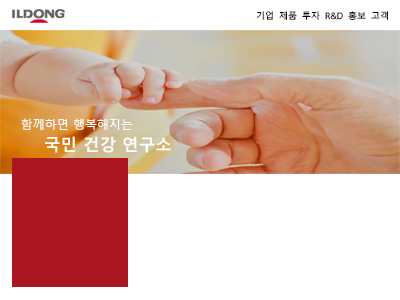
<style>
.page{position:relative;width:400px;height:300px;background:#ffffff}
.page>*{position:absolute;margin:0}
.t1{font:8.8px "MalgunGothic-Semilight";color:#050000}
.t2{font:12px "MalgunGothic";color:#ffffff}
.t3{font:16.9px "MalgunGothicBold";color:#ffffff}
</style>
<div class="page">
<p class="t1" style="left:256px;top:11px;width:132px;height:9px">기업  제품  투자  R&amp;D  홍보  고객</p>
<p class="t2" style="left:21px;top:118px;width:112px;height:12px">함께하면 행복해지는</p>
<p class="t3" style="left:45px;top:136px;width:126px;height:17px">국민 건강 연구소</p>
</div>
